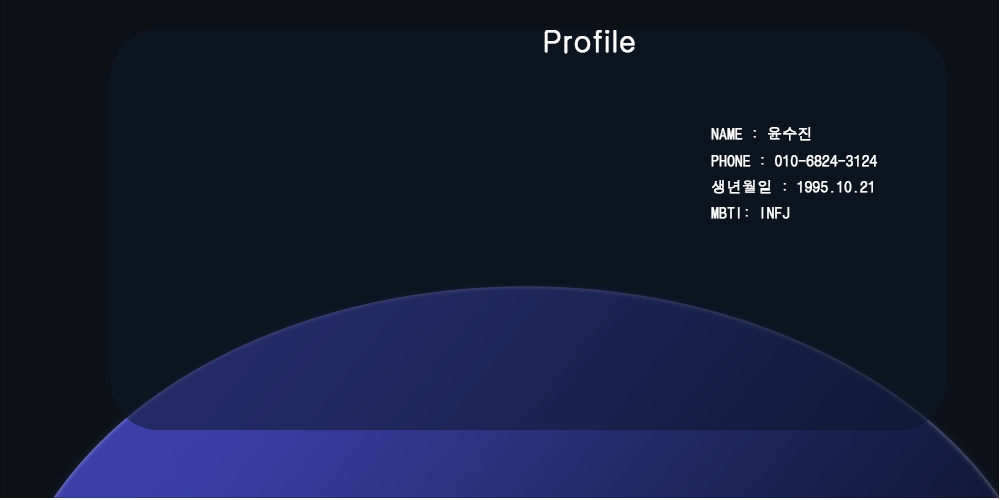
<style>
.page{position:relative;width:1000px;height:500px;background:#0c141f}
.page>*{position:absolute;margin:0}
.t1{font:30px "Gulim";color:#ffffff;font-weight:bold}
.t2{font:15px "DotumChe";color:#ffffff;font-weight:bold}
</style>
<div class="page">
<p class="t1" style="left:544px;top:30px;width:91px;height:24px">Profile</p>
<p class="t2" style="left:711px;top:127px;width:167px;height:92px">NAME : 윤수진<br>PHONE : 010-6824-3124<br>생년월일 : 1995.10.21<br>MBTI: INFJ</p>
</div>
